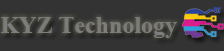
<style>
.page{position:relative;width:224px;height:51px;background:#333333}
.page>*{position:absolute;margin:0}
.t1{font:24px "TimesNewRomanPS-BoldMT";color:#7c7c7c}
</style>
<div class="page">
<p class="t1" style="left:1px;top:17px;width:176px;height:21px">KYZ Technology</p>
</div>
